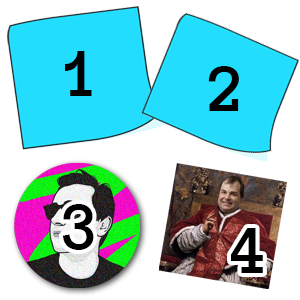
<style>
.page{position:relative;width:300px;height:300px;background:#ffffff}
.page>*{position:absolute;margin:0}
.t1{font:70.2px "AnonymicePowerline-Bold";color:#000000}
</style>
<div class="page">
<p class="t1" style="left:65px;top:51px;width:27px;height:45px">1</p>
<p class="t1" style="left:208px;top:66px;width:31px;height:45px">2</p>
<p class="t1" style="left:62px;top:204px;width:32px;height:46px">3</p>
<p class="t1" style="left:231px;top:228px;width:32px;height:45px">4</p>
</div>
